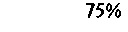
<style>
.page{position:relative;width:128px;height:32px;background:#ffffff}
.page>*{position:absolute;margin:0}
.t1{font:24px "DomCasualBT-Regular";color:#000000}
</style>
<div class="page">
<p class="t1" style="left:86px;top:3px;width:35px;height:15px">75%</p>
</div>
